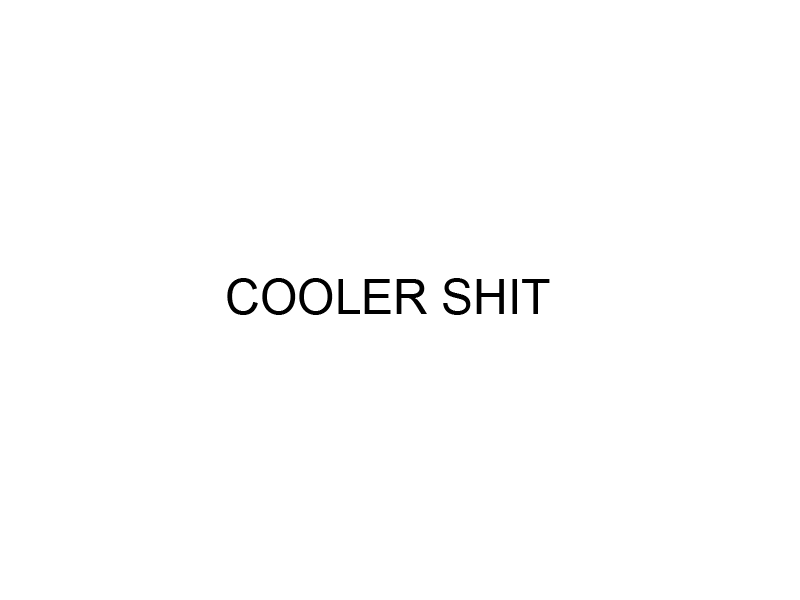
<style>
.page{position:relative;width:800px;height:600px;background:#ffffff}
.page>*{position:absolute;margin:0}
.t1{font:48px "ArialMT";color:#000000}
</style>
<div class="page">
<p class="t1" style="left:227px;top:278px;width:323px;height:37px">COOLER SHIT</p>
</div>
